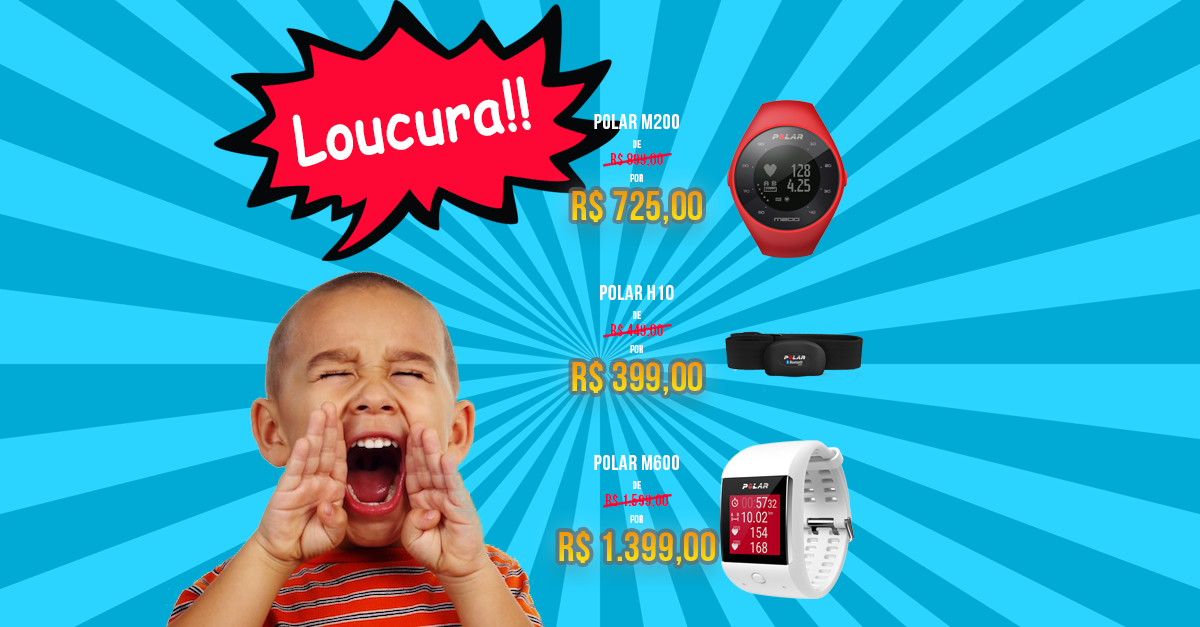
<style>
.page{position:relative;width:1200px;height:627px;background:#00aad4}
.page>*{position:absolute;margin:0}
.t1{font:66px "ComicSansMS-Bold";letter-spacing:0.02em;color:#ffffff;scale:0.85 1}
.t2{font:21.5px "BebasNeueBold";letter-spacing:0.02em;color:#ffffff}
.t3{font:10.7px "BebasNeueBold";letter-spacing:0.02em;color:#ffffff}
.t4{font:16.1px "BebasNeueBold";letter-spacing:0.02em;color:#ff0230}
.t5{font:40.3px "BebasNeueBold";letter-spacing:0.02em}
</style>
<div class="page">
<p class="t1" style="left:292px;top:76px;width:239px;height:91px;rotate:-9deg">Loucura!!</p>
<p class="t2" style="left:594px;top:114px;width:85px;height:15px">Polar M200</p>
<p class="t3" style="left:633px;top:140px;width:8px;height:8px">De</p>
<p class="t4" style="left:611px;top:153px;width:52px;height:14px">R$ 899,00</p>
<p class="t3" style="left:630px;top:174px;width:13px;height:8px">por</p>
<p class="t5" style="left:572px;top:190px;width:130px;height:34px">R$ 725,00</p>
<p class="t2" style="left:600px;top:285px;width:74px;height:15px">Polar h10</p>
<p class="t3" style="left:633px;top:311px;width:8px;height:8px">De</p>
<p class="t4" style="left:611px;top:324px;width:52px;height:14px">R$ 449,00</p>
<p class="t3" style="left:630px;top:345px;width:13px;height:8px">por</p>
<p class="t5" style="left:572px;top:361px;width:130px;height:34px">R$ 399,00</p>
<p class="t2" style="left:594px;top:455px;width:85px;height:16px">Polar M600</p>
<p class="t3" style="left:633px;top:481px;width:8px;height:8px">De</p>
<p class="t4" style="left:606px;top:494px;width:62px;height:14px">R$ 1.599,00</p>
<p class="t3" style="left:630px;top:515px;width:13px;height:8px">por</p>
<p class="t5" style="left:559px;top:531px;width:156px;height:34px">R$ 1.399,00</p>
</div>
